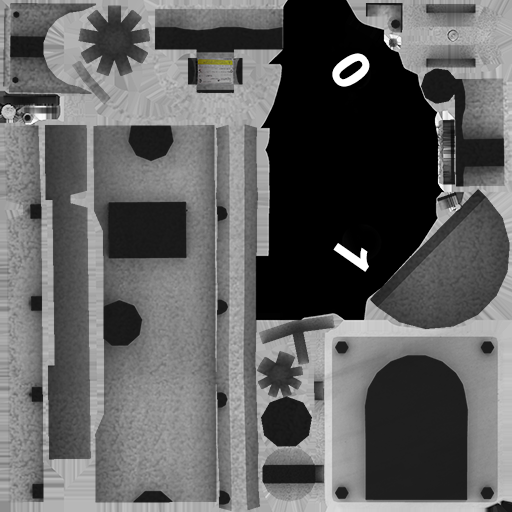
<style>
.page{position:relative;width:512px;height:512px}
.page>*{position:absolute;margin:0}
.t1{font:91.7px "Arial-BoldMT";letter-spacing:0.06em;color:#ffffff;scale:1.03 1}
</style>
<div class="page">
<p class="t1" style="left:332px;top:53px;width:38px;height:34px;rotate:55deg">0</p>
<p class="t1" style="left:333px;top:243px;width:36px;height:29px;rotate:125deg">1</p>
</div>
